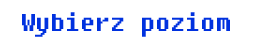
<style>
.page{position:relative;width:256px;height:50px;background:#ffffff}
.page>*{position:absolute;margin:0}
.t1{font:24px "Fixedsys";color:#0031df}
</style>
<div class="page">
<p class="t1" style="left:22px;top:12px;width:208px;height:25px">Wybierz poziom</p>
</div>
